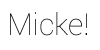
<style>
.page{position:relative;width:100px;height:50px;background:#ffffff}
.page>*{position:absolute;margin:0}
.t1{font:30px "Roboto-Thin";color:#000000}
</style>
<div class="page">
<p class="t1" style="left:10px;top:12px;width:77px;height:24px">Micke!</p>
</div>
